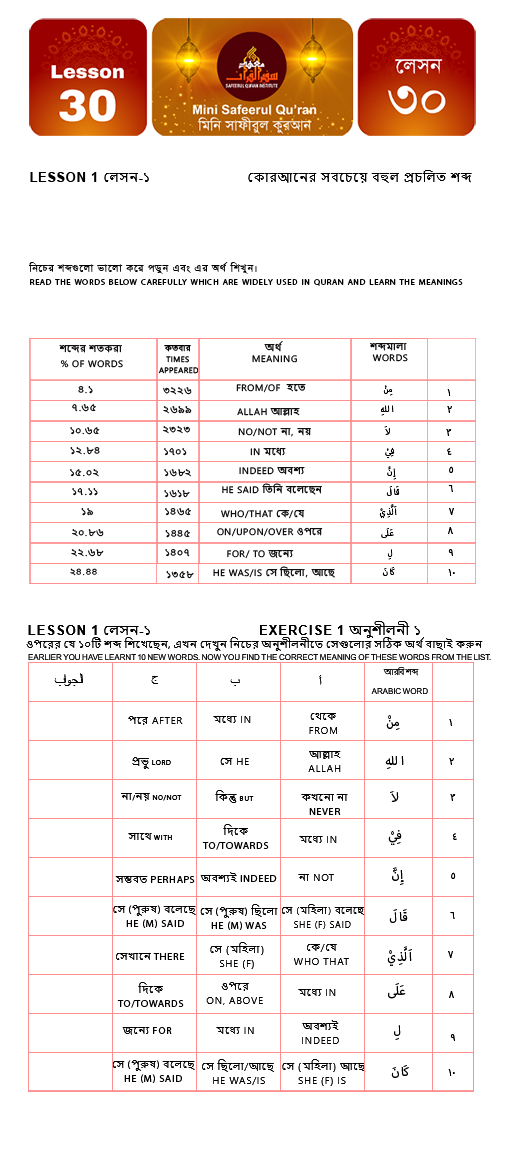
<style>
.page{position:relative;width:505px;height:1150px;background:#ffffff}
.page>*{position:absolute;margin:0}
.t1{font:12.7px "Arial-BoldMT";letter-spacing:0.06em;color:#000000;text-transform:uppercase}
.t2{font:12.5px "NirmalaUI";letter-spacing:0.06em;color:#000000;text-transform:uppercase}
.t3{font:12.5px "Arial-BoldMT";letter-spacing:0.06em;color:#000000;text-transform:uppercase}
.t4{font:9.3px "AdorshoLipi";letter-spacing:0.06em;color:#000000;text-transform:uppercase}
.t5{font:8.5px "MyriadPro-Regular";letter-spacing:0.06em;color:#000000;text-transform:uppercase}
.t6{font:9.3px/11px "NirmalaUI";letter-spacing:0.06em;color:#000000;text-transform:uppercase}
.t7{font:9.3px/15.3px "NirmalaUI";letter-spacing:0.06em;color:#000000;text-transform:uppercase}
.t8{font:7.6px/11px "NirmalaUI";letter-spacing:0.06em;color:#000000;text-transform:uppercase}
.t9{font:9.3px "NirmalaUI";letter-spacing:0.06em;color:#000000;text-transform:uppercase}
.t10{font:11.9px "MyriadArabic-Regular";letter-spacing:0.06em;color:#000000;text-transform:uppercase}
.t11{font:14px "MyriadArabic-Regular";letter-spacing:0.06em;color:#000000;text-transform:uppercase}
.t12{font:9.3px "NirmalaUI";letter-spacing:0.06em;text-transform:uppercase}
.t13{font:8.5px "NirmalaUI";letter-spacing:0.06em;color:#000000;text-transform:uppercase}
.t14{font:12.7px "NirmalaUI";letter-spacing:0.06em;color:#000000;text-transform:uppercase}
.t15{font:10.2px "NirmalaUI";letter-spacing:0.06em;color:#000000;text-transform:uppercase}
.t16{font:10.2px "MyriadPro-Regular";letter-spacing:0.06em;color:#000000;text-transform:uppercase}
.t17{font:8.5px "ArialMT";letter-spacing:-0.08em;color:#000000;text-transform:uppercase}
.t18{font:15.3px "ArialMT";letter-spacing:-0.08em;color:#000000;text-transform:uppercase}
.t19{font:12.7px "ArialMT";letter-spacing:-0.08em;color:#000000;text-transform:uppercase}
.t20{font:8.5px/18.7px "ArialMT";letter-spacing:-0.08em;color:#000000;text-transform:uppercase}
.t21{font:8.5px/18.7px "NirmalaUI";letter-spacing:-0.08em;color:#000000;text-transform:uppercase}
.t22{font:10.2px/14px "NirmalaUI";letter-spacing:0.06em;color:#000000;text-transform:uppercase}
.t23{font:17px "MyriadArabic-Regular";letter-spacing:0.06em;color:#000000;text-transform:uppercase}
.t24{font:10.2px "MyriadArabic-Regular";letter-spacing:0.06em;color:#000000;text-transform:uppercase}
.t25{font:10.2px/14px "MyriadPro-Regular";letter-spacing:0.06em;color:#000000;text-transform:uppercase}
.t26{font:9.3px/14px "NirmalaUI";letter-spacing:0.06em;color:#000000;text-transform:uppercase}
</style>
<div class="page">
<p class="t1" style="left:30px;top:172px;width:67px;height:10px">Lesson 1</p>
<p class="t2" style="left:104px;top:170px;width:368px;height:13px">লেসন<span class="t3">-</span>১                কোরআনের সবচেয়ে বহুল প্রচলিত শব্দ</p>
<p class="t4" style="left:29px;top:262px;width:228px;height:12px">নিচের শব্দগুলো ভালো করে পড়ুন এবং এর অর্থ শিখুন।</p>
<p class="t5" style="left:30px;top:279px;width:433px;height:7px">Read the words below carefully which are widely used in Quran and learn the meanings</p>
<p class="t6" style="left:252px;top:341px;width:45px;height:22px;text-align:center">অর্থ<br> Meaning</p>
<p class="t7" style="left:59px;top:345px;width:64px;height:23px;text-align:center">শব্দের শতকরা <br>% of words</p>
<p class="t8" style="left:159px;top:345px;width:40px;height:29px;text-align:center">কতবার <br>Times <br>appeared</p>
<p class="t6" style="left:370px;top:343px;width:38px;height:19px;text-align:center">শব্দমালা<br>     Words</p>
<p class="t9" style="left:78px;top:386px;width:15px;height:8px">৪.১</p>
<p class="t9" style="left:163px;top:387px;width:29px;height:8px">৩২২৬</p>
<p class="t9" style="left:236px;top:384px;width:70px;height:9px">From/of  হতে</p>
<p class="t10" style="left:383px;top:385px;width:10px;height:11px">مِنْ</p>
<p class="t11" style="left:447px;top:389px;width:4px;height:7px">١</p>
<p class="t12" style="left:72px;top:404px;width:24px;height:8px">৭.৬৫</p>
<p class="t12" style="left:163px;top:406px;width:29px;height:8px">২৬৯৯</p>
<p class="t9" style="left:237px;top:408px;width:63px;height:8px">Allah আল্লাহ</p>
<p class="t10" style="left:380px;top:405px;width:14px;height:11px">اللهِ</p>
<p class="t11" style="left:447px;top:406px;width:5px;height:7px">٢</p>
<p class="t12" style="left:70px;top:427px;width:30px;height:8px">১০.৬৫</p>
<p class="t9" style="left:163px;top:426px;width:27px;height:8px">২৩২৩</p>
<p class="t9" style="left:238px;top:428px;width:73px;height:9px">No/Not না, নয়</p>
<p class="t10" style="left:384px;top:426px;width:6px;height:9px">لاَ</p>
<p class="t11" style="left:446px;top:429px;width:6px;height:7px">٣</p>
<p class="t9" style="left:70px;top:447px;width:30px;height:8px">১২.৮৪</p>
<p class="t12" style="left:164px;top:448px;width:23px;height:8px">১৭০১</p>
<p class="t9" style="left:250px;top:447px;width:36px;height:9px">In মধ্যে</p>
<p class="t10" style="left:385px;top:447px;width:10px;height:12px">فِيْ</p>
<p class="t11" style="left:447px;top:448px;width:5px;height:7px">٤</p>
<p class="t12" style="left:70px;top:469px;width:29px;height:8px">১৫.০২</p>
<p class="t9" style="left:164px;top:469px;width:27px;height:8px">১৬৮২</p>
<p class="t9" style="left:239px;top:467px;width:66px;height:8px">Indeed অবশ্য</p>
<p class="t10" style="left:387px;top:466px;width:9px;height:14px">إِنَّ</p>
<p class="t11" style="left:449px;top:466px;width:5px;height:7px">٥</p>
<p class="t9" style="left:222px;top:483px;width:100px;height:12px">He said তিনি বলেছেন</p>
<p class="t10" style="left:386px;top:486px;width:14px;height:10px">قَالَ</p>
<p class="t11" style="left:448px;top:485px;width:5px;height:7px">٦</p>
<p class="t9" style="left:72px;top:488px;width:26px;height:8px">১৭.১১</p>
<p class="t9" style="left:164px;top:490px;width:26px;height:8px">১৬১৮</p>
<p class="t9" style="left:81px;top:508px;width:12px;height:8px">১৯</p>
<p class="t12" style="left:165px;top:508px;width:26px;height:8px">১৪৬৫</p>
<p class="t9" style="left:221px;top:510px;width:84px;height:9px">Who/that কে/যে</p>
<p class="t10" style="left:379px;top:504px;width:18px;height:15px">اَلَّذِيْ</p>
<p class="t11" style="left:449px;top:508px;width:5px;height:7px">٧</p>
<p class="t9" style="left:72px;top:529px;width:32px;height:8px">২০.৮৬</p>
<p class="t9" style="left:165px;top:530px;width:25px;height:8px">১৪৪৫</p>
<p class="t9" style="left:217px;top:527px;width:106px;height:10px">On/upon/over ওপরে</p>
<p class="t10" style="left:381px;top:528px;width:13px;height:10px">عَلَى</p>
<p class="t11" style="left:448px;top:527px;width:5px;height:7px">٨</p>
<p class="t9" style="left:71px;top:549px;width:33px;height:8px">২২.৬৮</p>
<p class="t12" style="left:165px;top:549px;width:25px;height:8px">১৪০৭</p>
<p class="t9" style="left:227px;top:550px;width:67px;height:9px">For/ to জন্যে</p>
<p class="t10" style="left:387px;top:549px;width:6px;height:11px">لِ</p>
<p class="t11" style="left:448px;top:549px;width:5px;height:7px">٩</p>
<p class="t13" style="left:70px;top:568px;width:27px;height:8px">২৪.৪৪</p>
<p class="t9" style="left:213px;top:566px;width:122px;height:12px">He was/is সে ছিলো, আছে</p>
<p class="t10" style="left:382px;top:567px;width:13px;height:9px">كَانَ</p>
<p class="t11" style="left:448px;top:569px;width:7px;height:7px">١٠</p>
<p class="t9" style="left:166px;top:571px;width:28px;height:8px">১৩৫৮</p>
<p class="t1" style="left:28px;top:621px;width:392px;height:17px">Lesson 1 <span class="t14">লেসন</span>-<span class="t14">১</span>                         Exercise 1 <span class="t14">অনুশীলনী ১</span></p>
<p class="t15" style="left:26px;top:637px;width:457px;height:14px">ওপরের যে ১০টি শব্দ শিখেছেন<span class="t16">, </span>এখন দেখুন নিচের অনুশীলনীতে সেগুলোর সঠিক অর্থ বাছাই করুন</p>
<p class="t17" style="left:28px;top:654px;width:463px;height:6px">Earlier you have learnt 10 new words. Now you find the correct meaning of these words from the list.</p>
<p class="t18" style="left:54px;top:673px;width:29px;height:13px">الجواب</p>
<p class="t19" style="left:151px;top:676px;width:7px;height:8px">ج</p>
<p class="t19" style="left:319px;top:675px;width:3px;height:10px">أ</p>
<p class="t20" style="left:371px;top:667px;width:57px;height:27px;text-align:center"><span class="t21">আরবি শব্দ</span><br>Arabic Word</p>
<p class="t19" style="left:230px;top:679px;width:10px;height:7px">ب</p>
<p class="t22" style="left:309px;top:713px;width:28px;height:21px;text-align:center">থেকে<br> From</p>
<p class="t15" style="left:128px;top:716px;width:55px;height:9px">পরে after</p>
<p class="t15" style="left:213px;top:716px;width:38px;height:7px">মধ্যে In</p>
<p class="t23" style="left:386px;top:715px;width:14px;height:15px">مِنْ</p>
<p class="t11" style="left:449px;top:719px;width:3px;height:7px">١</p>
<p class="t15" style="left:132px;top:757px;width:39px;height:12px">প্রভু<span class="t24"> Lord</span></p>
<p class="t15" style="left:220px;top:758px;width:29px;height:7px">সে He</p>
<p class="t22" style="left:308px;top:751px;width:33px;height:21px;text-align:center">আল্লাহ<br>Allah</p>
<p class="t23" style="left:385px;top:756px;width:19px;height:13px">اللهِ</p>
<p class="t11" style="left:449px;top:758px;width:5px;height:7px">٢</p>
<p class="t24" style="left:121px;top:793px;width:61px;height:8px"><span class="t15">না</span>/<span class="t15">নয়</span> No/Not</p>
<p class="t15" style="left:215px;top:790px;width:39px;height:13px">কিন্তু<span class="t24"> But</span></p>
<p class="t22" style="left:301px;top:794px;width:47px;height:21px;text-align:center">কখনো না<span class="t25"><br>Never</span></p>
<p class="t23" style="left:390px;top:791px;width:9px;height:11px">لاَ</p>
<p class="t11" style="left:450px;top:794px;width:6px;height:7px">٣</p>
<p class="t15" style="left:128px;top:833px;width:44px;height:7px">সাথে<span class="t24"> With</span></p>
<p class="t25" style="left:202px;top:824px;width:67px;height:26px;text-align:center"><span class="t22">দিকে</span><br>To/Towards</p>
<p class="t23" style="left:388px;top:830px;width:14px;height:15px">فِيْ</p>
<p class="t11" style="left:452px;top:833px;width:5px;height:7px">٤</p>
<p class="t15" style="left:299px;top:836px;width:38px;height:7px">মধ্যে In</p>
<p class="t23" style="left:392px;top:867px;width:12px;height:18px">إِنَّ</p>
<p class="t16" style="left:115px;top:876px;width:80px;height:7px"><span class="t15">সম্ভবত</span> Perhaps</p>
<p class="t15" style="left:200px;top:872px;width:77px;height:10px">অবশ্যই<span class="t16"> Indeed</span></p>
<p class="t15" style="left:298px;top:874px;width:36px;height:7px">না Not</p>
<p class="t11" style="left:451px;top:872px;width:5px;height:7px">٥</p>
<p class="t25" style="left:113px;top:905px;width:83px;height:23px;text-align:center"><span class="t22">সে</span> (<span class="t22">পুরুষ</span>) <span class="t22">বলেছে</span> <br>He (M) said</p>
<p class="t25" style="left:200px;top:904px;width:78px;height:26px;text-align:center"><span class="t22">সে</span> (<span class="t22">পুরুষ</span>) <span class="t22">ছিলো</span><br>He (M) was</p>
<p class="t26" style="left:282px;top:904px;width:82px;height:25px;text-align:center">সে (মহিলা) বলেছে<br>She (F) said</p>
<p class="t23" style="left:389px;top:909px;width:19px;height:14px">قَالَ</p>
<p class="t11" style="left:450px;top:912px;width:5px;height:7px">٦</p>
<p class="t22" style="left:210px;top:942px;width:54px;height:27px;text-align:center">সে (মহিলা)<br>She (F)</p>
<p class="t15" style="left:116px;top:953px;width:69px;height:7px">সেখানে<span class="t16"> There</span></p>
<p class="t22" style="left:294px;top:944px;width:55px;height:21px;text-align:center">কে/যে<br>Who that</p>
<p class="t23" style="left:387px;top:946px;width:25px;height:20px">اَلَّذِيْ</p>
<p class="t11" style="left:448px;top:951px;width:5px;height:7px">٧</p>
<p class="t25" style="left:117px;top:982px;width:67px;height:26px;text-align:center"><span class="t22">দিকে</span><br>To/Towards</p>
<p class="t22" style="left:206px;top:982px;width:57px;height:23px;text-align:center">ওপরে<br>On, above</p>
<p class="t15" style="left:298px;top:989px;width:38px;height:7px">মধ্যে In</p>
<p class="t23" style="left:388px;top:983px;width:18px;height:16px">عَلَى</p>
<p class="t11" style="left:449px;top:991px;width:5px;height:7px">٨</p>
<p class="t22" style="left:302px;top:1020px;width:37px;height:24px;text-align:center">অবশ্যই<br>Indeed</p>
<p class="t23" style="left:394px;top:1025px;width:7px;height:15px">لِ</p>
<p class="t15" style="left:122px;top:1027px;width:50px;height:8px">জন্যে<span class="t16"> For</span></p>
<p class="t15" style="left:216px;top:1027px;width:38px;height:7px">মধ্যে In</p>
<p class="t11" style="left:450px;top:1034px;width:5px;height:7px">٩</p>
<p class="t25" style="left:112px;top:1060px;width:83px;height:23px;text-align:center"><span class="t22">সে</span> (<span class="t22">পুরুষ</span>) <span class="t22">বলেছে</span> <br>He (M) said</p>
<p class="t22" style="left:202px;top:1059px;width:72px;height:26px;text-align:center">সে ছিলো/আছে <br>He was/is</p>
<p class="t22" style="left:282px;top:1059px;width:84px;height:27px;text-align:center">সে (মহিলা) আছে<br>She (F) is</p>
<p class="t23" style="left:391px;top:1065px;width:18px;height:13px">كَانَ</p>
<p class="t11" style="left:448px;top:1069px;width:7px;height:7px">١٠</p>
</div>
